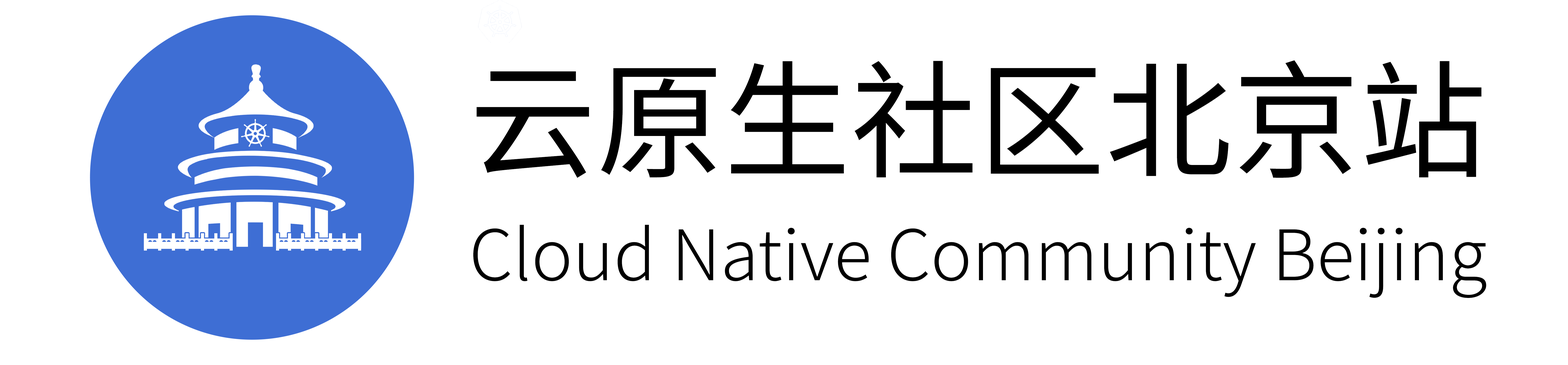
<style>
.page{position:relative;width:1568px;height:365px;background:#ffffff}
.page>*{position:absolute;margin:0}
.t1{font:127.2px "SourceHanSansCN-Regular";color:#000000}
.t2{font:69.6px "SourceHanSansCN-Light";color:#000000}
</style>
<div class="page">
<p class="t1" style="left:477px;top:60px;width:1005px;height:118px">云原生社区北京站</p>
<p class="t2" style="left:473px;top:224px;width:1013px;height:74px">Cloud Native Community Beijing</p>
</div>
